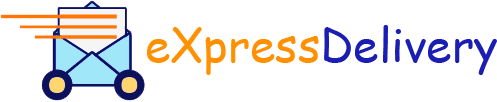
<style>
.page{position:relative;width:497px;height:102px;background:#ffffff}
.page>*{position:absolute;margin:0}
.t1{font:46px "ComicSansMS";color:#1a1eb2}
.t2{font:46px "ComicSansMS";color:#ff9000}
</style>
<div class="page">
<p class="t1" style="left:147px;top:25px;width:350px;height:50px"><span class="t2">eXpress</span>Delivery</p>
</div>
